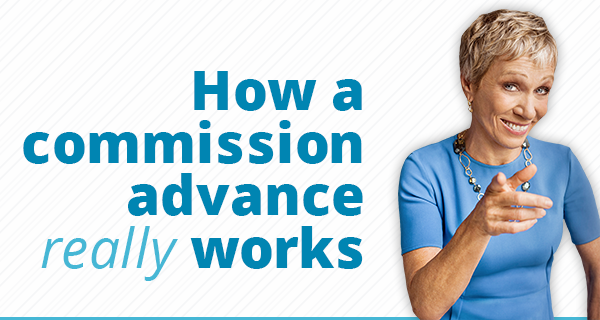
<style>
.page{position:relative;width:600px;height:320px;background:#fefefe}
.page>*{position:absolute;margin:0}
.t1{font:55.1px/52.9px "OpenSans-Extrabold";color:#0085b2}
.t2{font:55.1px/52.9px "OpenSans-Italic";color:#46b7d5}
</style>
<div class="page">
<p class="t1" style="left:23px;top:71px;width:340px;height:210px;text-align:right">How a<br>commission<br>advance<br><span class="t2">really</span> works</p>
</div>
